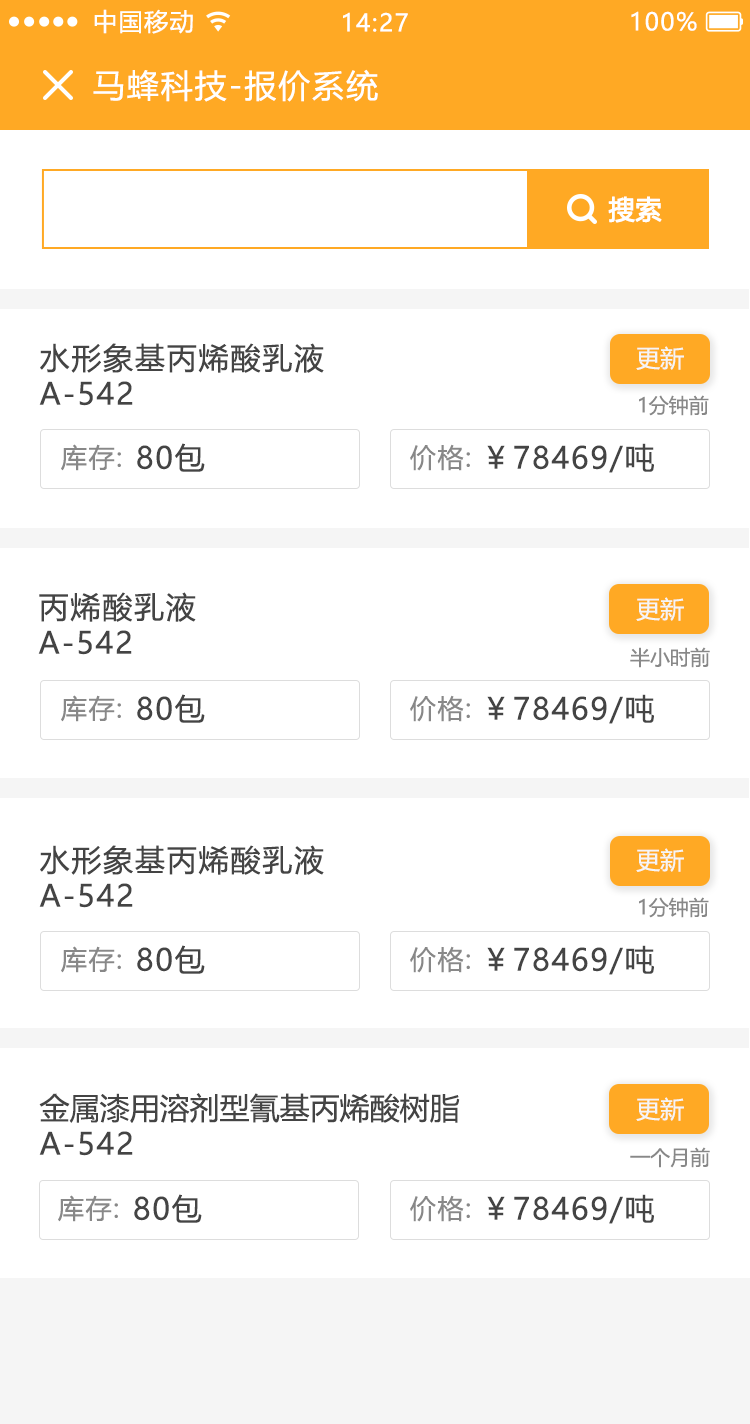
<style>
.page{position:relative;width:750px;height:1424px;background:#ffffff}
.page>*{position:absolute;margin:0}
.t1{font:24px "MicrosoftYaHeiUI";letter-spacing:0.06em;color:#ffffff}
.t2{font:32px "MicrosoftYaHeiUI";letter-spacing:0.06em;color:#ffffff}
.t3{font:26px "MicrosoftYaHeiUI";color:#ffffff;font-weight:bold}
.t4{font:30px/36px "MicrosoftYaHeiUI";letter-spacing:0.06em;color:#444444}
.t5{font:24px "MicrosoftYaHeiUI";color:#f5f5f5}
.t6{font:20px "MicrosoftYaHeiUI";color:#888888}
.t7{font:26px "MicrosoftYaHeiUI";letter-spacing:0.06em;color:#888888}
.t8{font:30px "MicrosoftYaHeiUI";letter-spacing:0.06em;color:#444444}
.t9{font:30px/36px "MicrosoftYaHeiUI";color:#444444}
</style>
<div class="page">
<p class="t1" style="left:94px;top:9px;width:99px;height:25px">中国移动</p>
<p class="t1" style="left:343px;top:12px;width:65px;height:20px">14:27</p>
<p class="t1" style="left:631px;top:11px;width:66px;height:20px">100%</p>
<p class="t2" style="left:93px;top:69px;width:285px;height:33px">马蜂科技-报价系统</p>
<p class="t3" style="left:608px;top:196px;width:54px;height:27px">搜索</p>
<p class="t4" style="left:39px;top:343px;width:285px;height:63px">水形象基丙烯酸乳液<br>A-542</p>
<p class="t5" style="left:636px;top:346px;width:48px;height:24px">更新</p>
<p class="t6" style="left:639px;top:395px;width:70px;height:21px">1分钟前</p>
<p class="t7" style="left:61px;top:444px;width:60px;height:27px">库存:</p>
<p class="t8" style="left:137px;top:443px;width:68px;height:29px">80包</p>
<p class="t7" style="left:410px;top:444px;width:60px;height:27px">价格:</p>
<p class="t8" style="left:487px;top:443px;width:167px;height:30px">￥78469/吨</p>
<p class="t4" style="left:38px;top:592px;width:158px;height:63px">丙烯酸乳液<br>A-542</p>
<p class="t5" style="left:636px;top:597px;width:48px;height:24px">更新</p>
<p class="t6" style="left:630px;top:647px;width:80px;height:21px">半小时前</p>
<p class="t7" style="left:61px;top:695px;width:60px;height:27px">库存:</p>
<p class="t8" style="left:137px;top:694px;width:68px;height:29px">80包</p>
<p class="t7" style="left:410px;top:695px;width:60px;height:27px">价格:</p>
<p class="t8" style="left:487px;top:694px;width:167px;height:30px">￥78469/吨</p>
<p class="t4" style="left:39px;top:845px;width:285px;height:63px">水形象基丙烯酸乳液<br>A-542</p>
<p class="t5" style="left:636px;top:848px;width:48px;height:24px">更新</p>
<p class="t6" style="left:639px;top:897px;width:70px;height:21px">1分钟前</p>
<p class="t7" style="left:61px;top:946px;width:60px;height:27px">库存:</p>
<p class="t8" style="left:137px;top:945px;width:68px;height:29px">80包</p>
<p class="t7" style="left:410px;top:946px;width:60px;height:27px">价格:</p>
<p class="t8" style="left:487px;top:945px;width:167px;height:30px">￥78469/吨</p>
<p class="t9" style="left:39px;top:1093px;width:421px;height:63px">金属漆用溶剂型氰基丙烯酸树脂<span class="t4"><br>A-542</span></p>
<p class="t5" style="left:636px;top:1097px;width:48px;height:24px">更新</p>
<p class="t6" style="left:630px;top:1147px;width:80px;height:21px">一个月前</p>
<p class="t7" style="left:58px;top:1195px;width:60px;height:27px">库存:</p>
<p class="t8" style="left:134px;top:1194px;width:68px;height:29px">80包</p>
<p class="t7" style="left:410px;top:1195px;width:60px;height:27px">价格:</p>
<p class="t8" style="left:487px;top:1194px;width:167px;height:30px">￥78469/吨</p>
</div>
